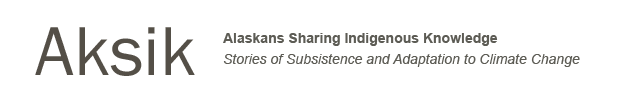
<style>
.page{position:relative;width:621px;height:95px;background:#ffffff}
.page>*{position:absolute;margin:0}
.t1{font:14px/21px "Arial-ItalicMT";color:#5d5c55}
.t2{font:14px/21px "Arial-BoldMT";color:#5d5c55}
</style>
<div class="page">
<p class="t1" style="left:223px;top:33px;width:357px;height:34px"><span class="t2">Alaskans Sharing Indigenous Knowledge<br></span>Stories of Subsistence and Adaptation to Climate Change</p>
</div>
